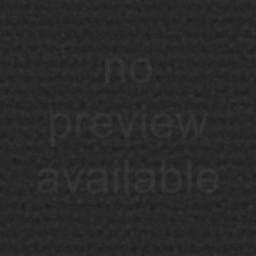
<style>
.page{position:relative;width:256px;height:256px}
.page>*{position:absolute;margin:0}
.t1{font:46px "ArialMT";letter-spacing:0.01em;color:#323232}
</style>
<div class="page">
<p class="t1" style="left:37px;top:57px;width:182px;height:137px;text-align:center">no<br>preview<br>available</p>
</div>
